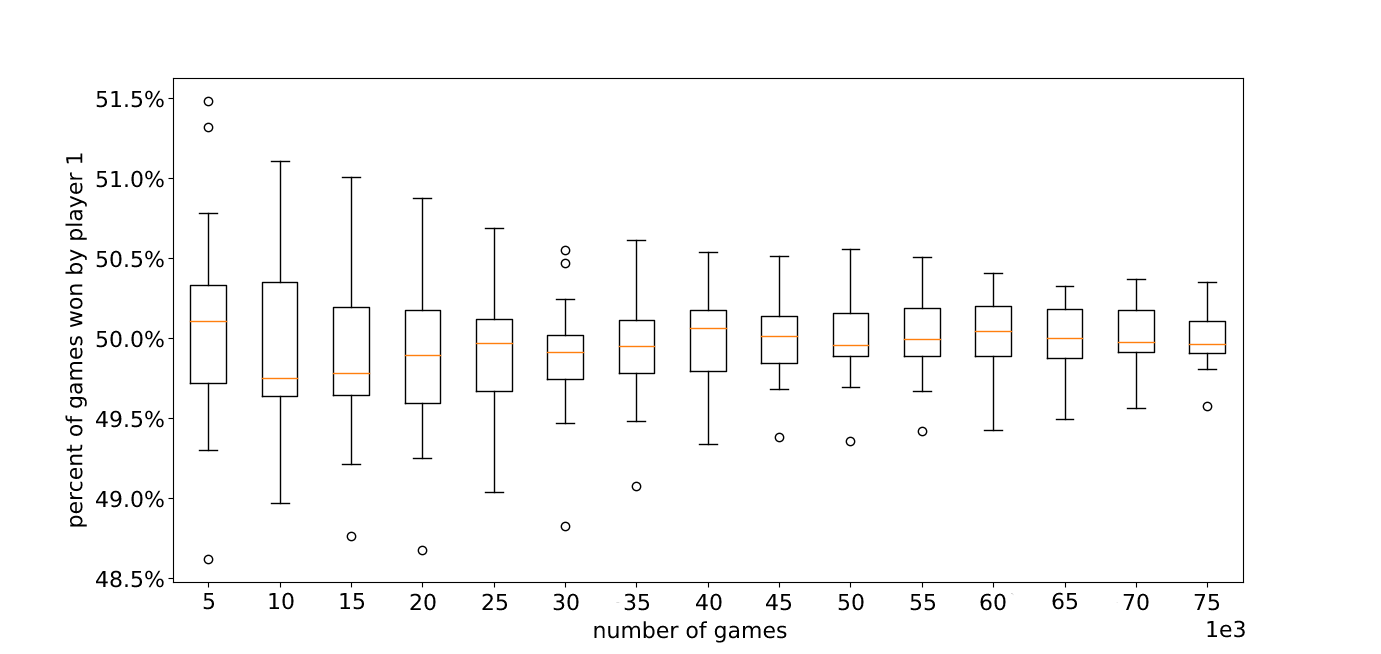
<style>
.page{position:relative;width:1381px;height:654px;background:#ffffff}
.page>*{position:absolute;margin:0}
.t1{font:22px "DejaVuSans";color:#000000}
</style>
<div class="page">
<p class="t1" style="left:96px;top:90px;width:68px;height:18px">51.5%</p>
<p class="t1" style="left:65px;top:153px;width:22px;height:374px;rotate:-90deg">percent of games won by player 1</p>
<p class="t1" style="left:96px;top:170px;width:68px;height:18px">51.0%</p>
<p class="t1" style="left:96px;top:250px;width:68px;height:18px">50.5%</p>
<p class="t1" style="left:96px;top:330px;width:68px;height:18px">50.0%</p>
<p class="t1" style="left:96px;top:410px;width:68px;height:18px">49.5%</p>
<p class="t1" style="left:96px;top:490px;width:68px;height:18px">49.0%</p>
<p class="t1" style="left:96px;top:570px;width:68px;height:18px">48.5%</p>
<p class="t1" style="left:203px;top:592px;width:12px;height:18px">5</p>
<p class="t1" style="left:269px;top:592px;width:25px;height:18px">10</p>
<p class="t1" style="left:340px;top:592px;width:25px;height:18px">15</p>
<p class="t1" style="left:410px;top:593px;width:26px;height:18px">20</p>
<p class="t1" style="left:482px;top:593px;width:26px;height:18px">25</p>
<p class="t1" style="left:553px;top:593px;width:26px;height:18px">30</p>
<p class="t1" style="left:624px;top:593px;width:26px;height:18px">35</p>
<p class="t1" style="left:696px;top:593px;width:26px;height:18px">40</p>
<p class="t1" style="left:766px;top:593px;width:26px;height:18px">45</p>
<p class="t1" style="left:838px;top:593px;width:26px;height:18px">50</p>
<p class="t1" style="left:910px;top:593px;width:26px;height:18px">55</p>
<p class="t1" style="left:980px;top:593px;width:26px;height:18px">60</p>
<p class="t1" style="left:1052px;top:592px;width:26px;height:18px">65</p>
<p class="t1" style="left:1123px;top:593px;width:26px;height:18px">70</p>
<p class="t1" style="left:1194px;top:593px;width:26px;height:18px">75</p>
<p class="t1" style="left:594px;top:621px;width:193px;height:22px">number of games</p>
<p class="t1" style="left:1207px;top:620px;width:38px;height:18px">1e3</p>
</div>
